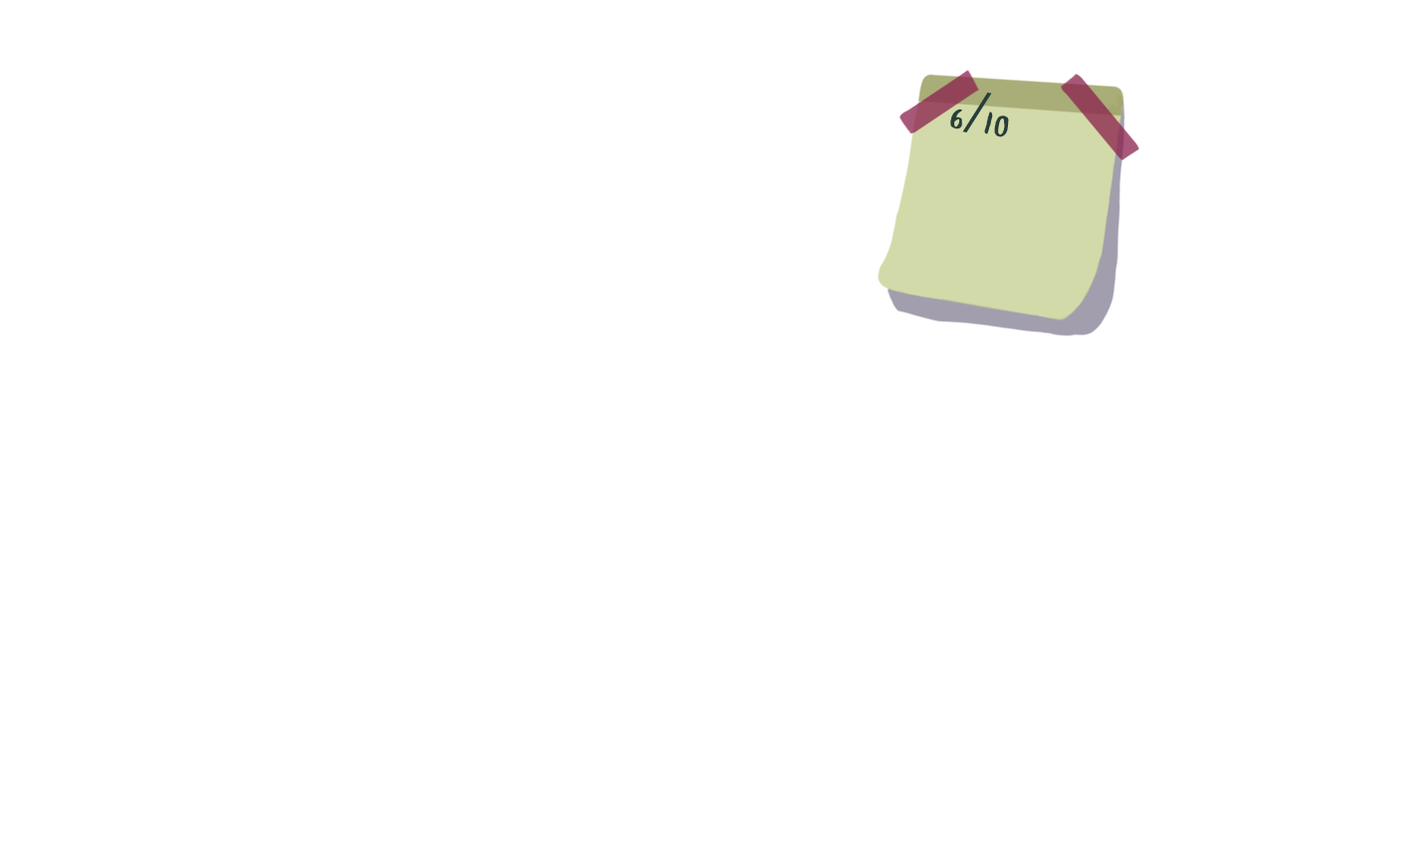
<style>
.page{position:relative;width:1410px;height:846px;background:#ffffff}
.page>*{position:absolute;margin:0}
.t1{font:59.7px "BabyFox";color:#283e3b;text-transform:uppercase}
.t2{font:59.7px "MyriadPro-Regular";color:#283e3b;text-transform:uppercase}
</style>
<div class="page">
<p class="t1" style="left:950px;top:93px;width:59px;height:44px;rotate:11deg">6<span class="t2">/</span>10</p>
</div>
